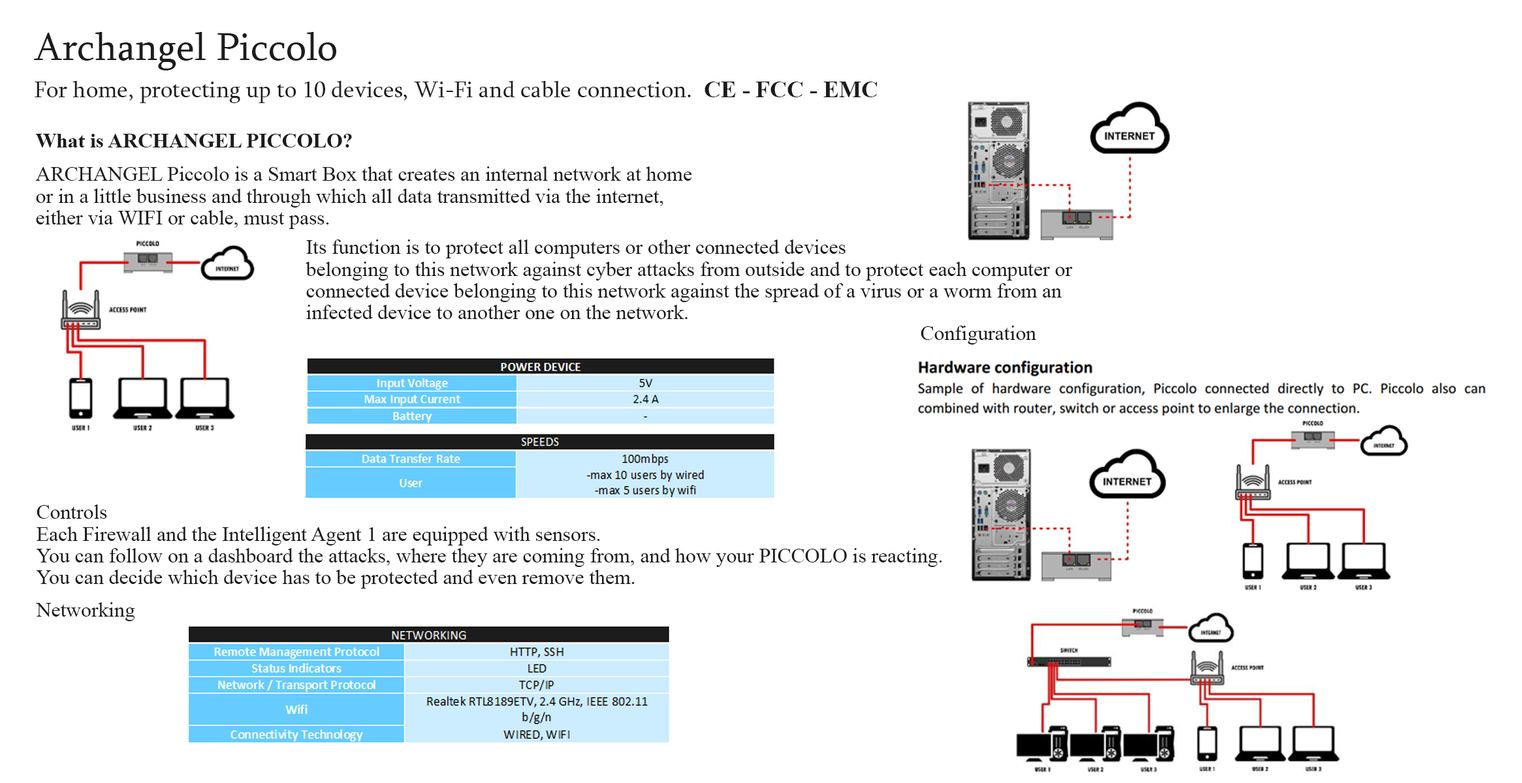
<style>
.page{position:relative;width:1522px;height:783px;background:#ffffff}
.page>*{position:absolute;margin:0}
.t1{font:39.7px "Sylfaen";color:#1c1c1c}
.t2{font:23.4px "Sylfaen";color:#1c1c1c}
.t3{font:23.4px "TimesNewRomanPS-BoldMT";color:#1c1c1c}
.t4{font:20.6px "TimesNewRomanPS-BoldMT";color:#1c1c1c}
.t5{font:20.6px/21.8px "TimesNewRomanPSMT";color:#1c1c1c}
.t6{font:20.6px "TimesNewRomanPSMT";color:#1c1c1c}
.t7{font:20.6px/10.9px "TimesNewRomanPSMT";color:#1c1c1c}
</style>
<div class="page">
<p class="t1" style="left:34px;top:32px;width:302px;height:39px">Archangel Piccolo</p>
<p class="t2" style="left:35px;top:81px;width:842px;height:22px">For home, protecting up to 10 devices, Wi-Fi and cable connection.  <span class="t3">CE - FCC - EMC</span></p>
<p class="t4" style="left:35px;top:134px;width:317px;height:14px">What is ARCHANGEL PICCOLO?</p>
<p class="t5" style="left:35px;top:166px;width:657px;height:63px">ARCHANGEL Piccolo is a Smart Box that creates an internal network at home<br>or in a little business and through which all data transmitted via the internet,<br>either via WIFI or cable, must pass.</p>
<p class="t5" style="left:306px;top:240px;width:767px;height:79px">Its function is to protect all computers or other connected devices<br>belonging to this network against cyber attacks from outside and to protect each computer or <br>connected device belonging to this network against the spread of a virus or a worm from an<br>infected device to another one on the network.</p>
<p class="t6" style="left:921px;top:326px;width:115px;height:19px">Configuration</p>
<p class="t7" style="left:36px;top:505px;width:906px;height:117px">Controls<br><br>Each Firewall and the Intelligent Agent 1 are equipped with sensors.<br><br>You can follow on a dashboard the attacks, where they are coming from, and how your PICCOLO is reacting.<br><br>You can decide which device has to be protected and even remove them.<br><br><br>Networking</p>
</div>
